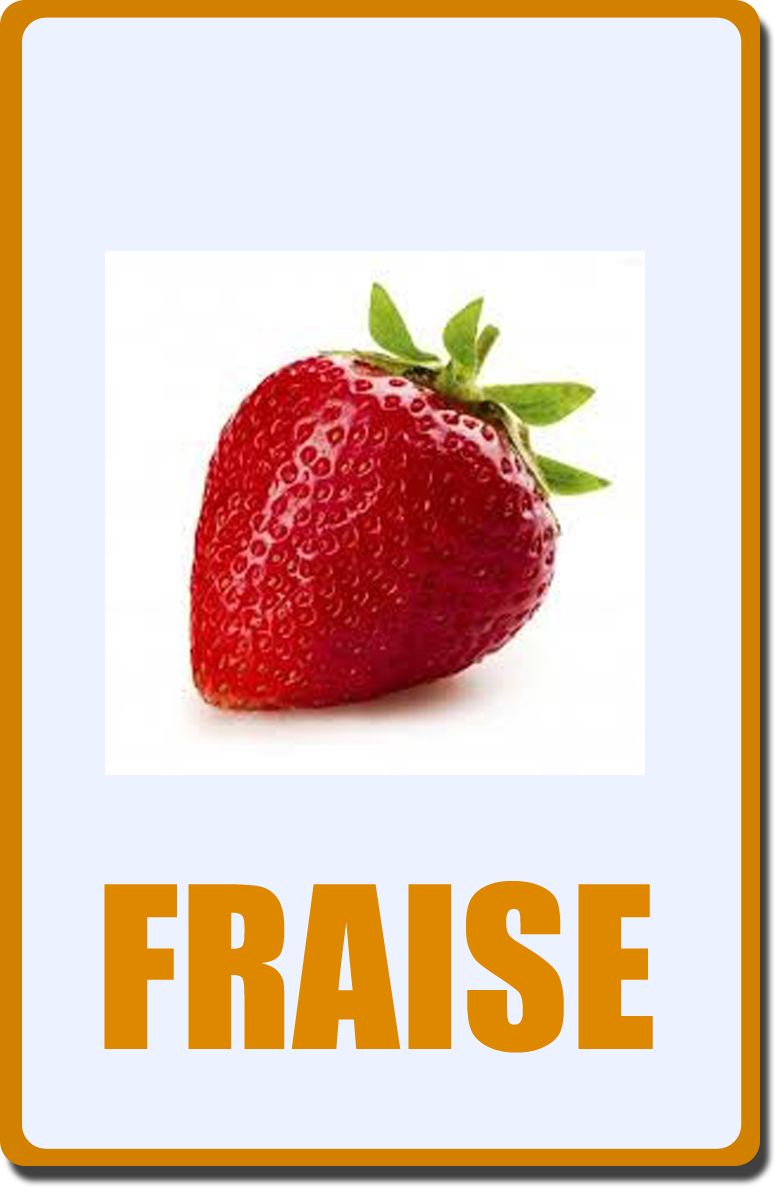
<style>
.page{position:relative;width:775px;height:1187px;background:#ecf2ff}
.page>*{position:absolute;margin:0}
.t1{font:208.3px "Impact";letter-spacing:0.005em;color:#de8800}
</style>
<div class="page">
<p class="t1" style="left:104px;top:881px;width:549px;height:172px">FRAISE</p>
</div>
